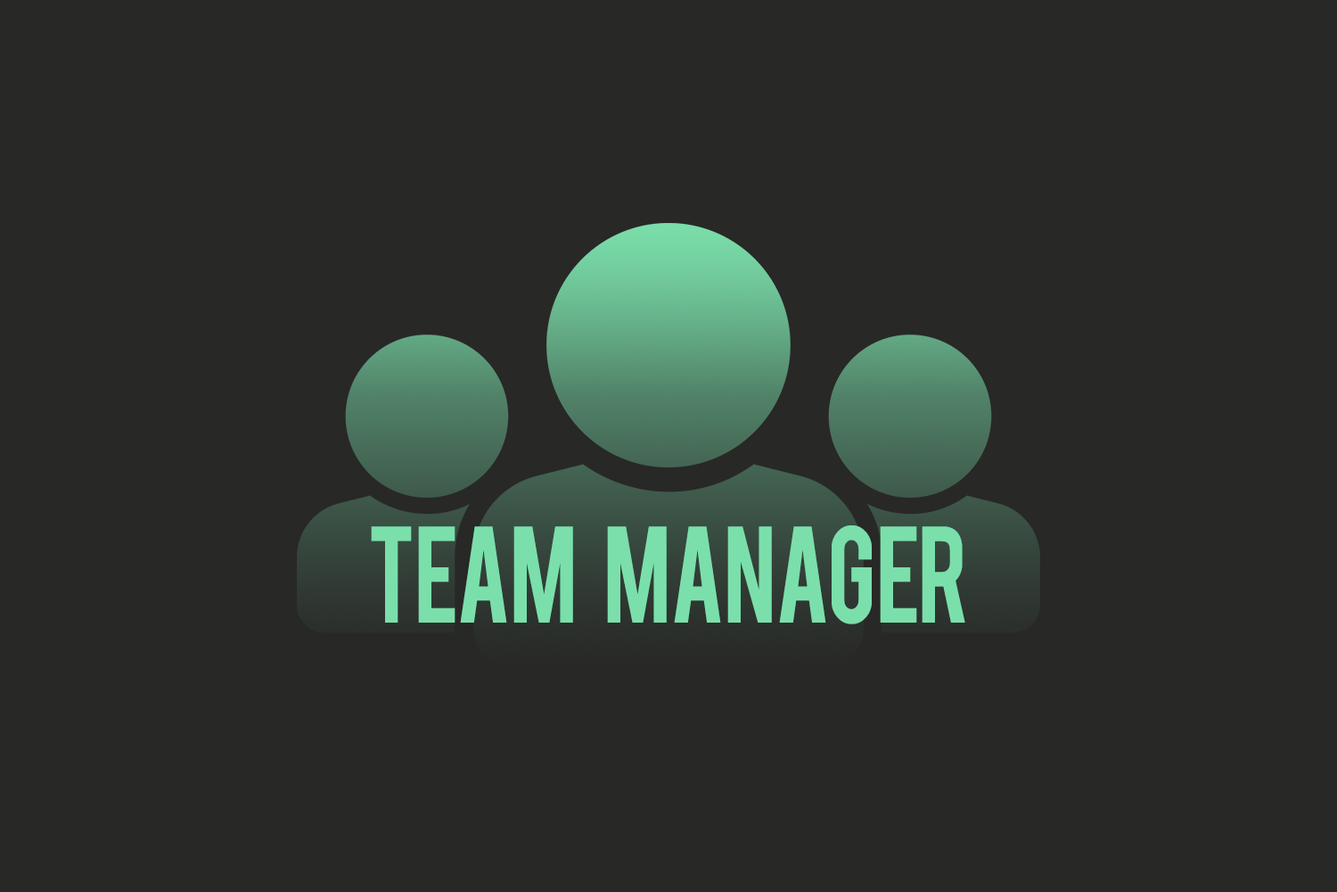
<style>
.page{position:relative;width:1337px;height:892px;background:#282827}
.page>*{position:absolute;margin:0}
.t1{font:107.9px "Bebas";letter-spacing:-0.03em;color:#7bdfab;scale:0.88 1}
</style>
<div class="page">
<p class="t1" style="left:371px;top:525px;width:595px;height:99px">TeaM     Manager</p>
</div>
